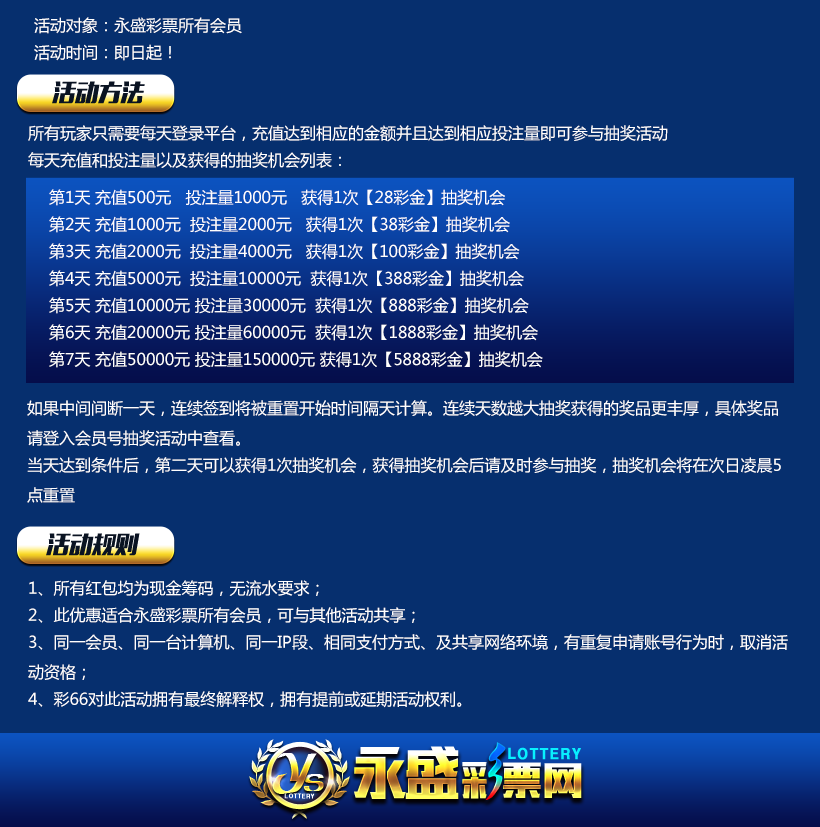
<style>
.page{position:relative;width:820px;height:827px;background:#062f6e}
.page>*{position:absolute;margin:0}
.t1{font:16px/30px "MicrosoftYaHei";color:#ffffff}
.t2{font:23.1px "MFLiHei_Noncommercial-Regular";color:#0a1322;text-transform:uppercase;font-style:italic}
.t3{font:16px/30px "MicrosoftYaHei";color:#ffffff;text-transform:uppercase}
</style>
<div class="page">
<p class="t1" style="left:34px;top:17px;width:208px;height:44px">活动对象：永盛彩票所有会员 <br>活动时间：即日起！</p>
<p class="t2" style="left:52px;top:81px;width:93px;height:23px">活动方法</p>
<p class="t1" style="left:28px;top:125px;width:640px;height:43px">所有玩家只需要每天登录平台，充值达到相应的金额并且达到相应投注量即可参与抽奖活动 <br>每天充值和投注量以及获得的抽奖机会列表：</p>
<p class="t3" style="left:49px;top:189px;width:494px;height:179px">第1天 充值500元   投注量1000元   获得1次【28彩金】抽奖机会 <br>第2天 充值1000元  投注量2000元   获得1次【38彩金】抽奖机会 <br>第3天 充值2000元  投注量4000元   获得1次【100彩金】抽奖机会 <br>第4天 充值5000元  投注量10000元  获得1次【388彩金】抽奖机会 <br>第5天 充值10000元 投注量30000元  获得1次【888彩金】抽奖机会 <br>第6天 充值20000元 投注量60000元  获得1次【1888彩金】抽奖机会 <br>第7天 充值50000元 投注量150000元 获得1次【5888彩金】抽奖机会</p>
<p class="t1" style="left:27px;top:400px;width:754px;height:103px">如果中间间断一天，连续签到将被重置开始时间隔天计算。连续天数越大抽奖获得的奖品更丰厚，具体奖品请登入会员号抽奖活动中查看。 <br>当天达到条件后，第二天可以获得1次抽奖机会，获得抽奖机会后请及时参与抽奖，抽奖机会将在次日凌晨5点重置</p>
<p class="t2" style="left:46px;top:533px;width:94px;height:23px">活动规则</p>
<p class="t1" style="left:28px;top:580px;width:760px;height:128px">1、所有红包均为现金筹码，无流水要求； <br>2、此优惠适合永盛彩票所有会员，可与其他活动共享； <br>3、同一会员、同一台计算机、同一IP段、相同支付方式、及共享网络环境，有重复申请账号行为时，取消活动资格； <br>4、彩66对此活动拥有最终解释权，拥有提前或延期活动权利。</p>
</div>
